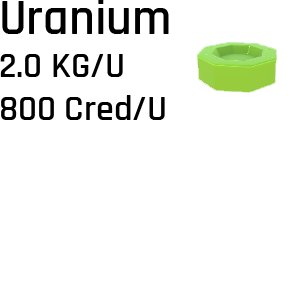
<style>
.page{position:relative;width:300px;height:283px;background:#ffffff}
.page>*{position:absolute;margin:0}
.t1{font:36px "Rajdhani-SemiBold";color:#000000}
.t2{font:50px "Rajdhani-SemiBold";color:#000000}
</style>
<div class="page">
<p class="t1" style="left:0px;top:0px;width:169px;height:120px"><span class="t2">Uranium<br></span>2.0 KG/U<br>800 Cred/U</p>
</div>
